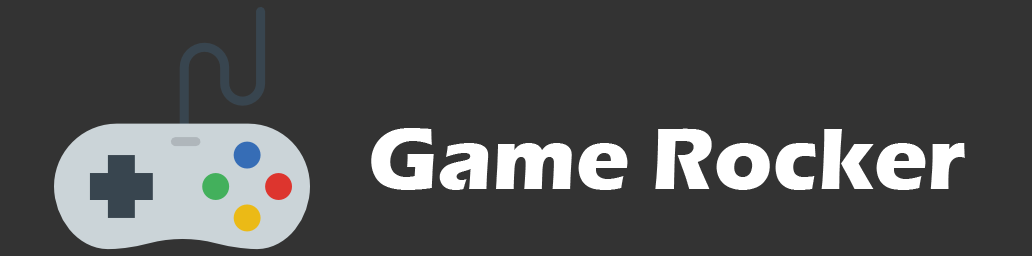
<style>
.page{position:relative;width:1032px;height:256px;background:#333333}
.page>*{position:absolute;margin:0}
.t1{font:89.8px "ErasITC-Bold";color:#ffffff}
</style>
<div class="page">
<p class="t1" style="left:371px;top:128px;width:594px;height:62px">Game Rocker</p>
</div>
